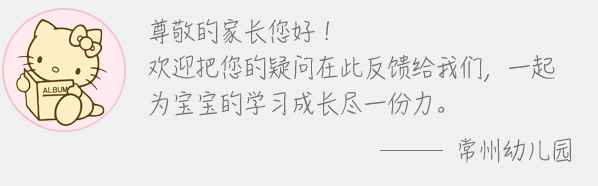
<style>
.page{position:relative;width:598px;height:186px;background:#f0f0f0}
.page>*{position:absolute;margin:0}
.t1{font:24px/36px "HanziPenSC-W3";color:#727272}
.t2{font:24px "HanziPenSC-W3";color:#727272}
</style>
<div class="page">
<p class="t1" style="left:148px;top:18px;width:407px;height:98px">尊敬的家长您好！<br>欢迎把您的疑问在此反馈给我们，一起<br>为宝宝的学习成长尽一份力。</p>
<p class="t2" style="left:459px;top:138px;width:112px;height:25px">常州幼儿园</p>
</div>
